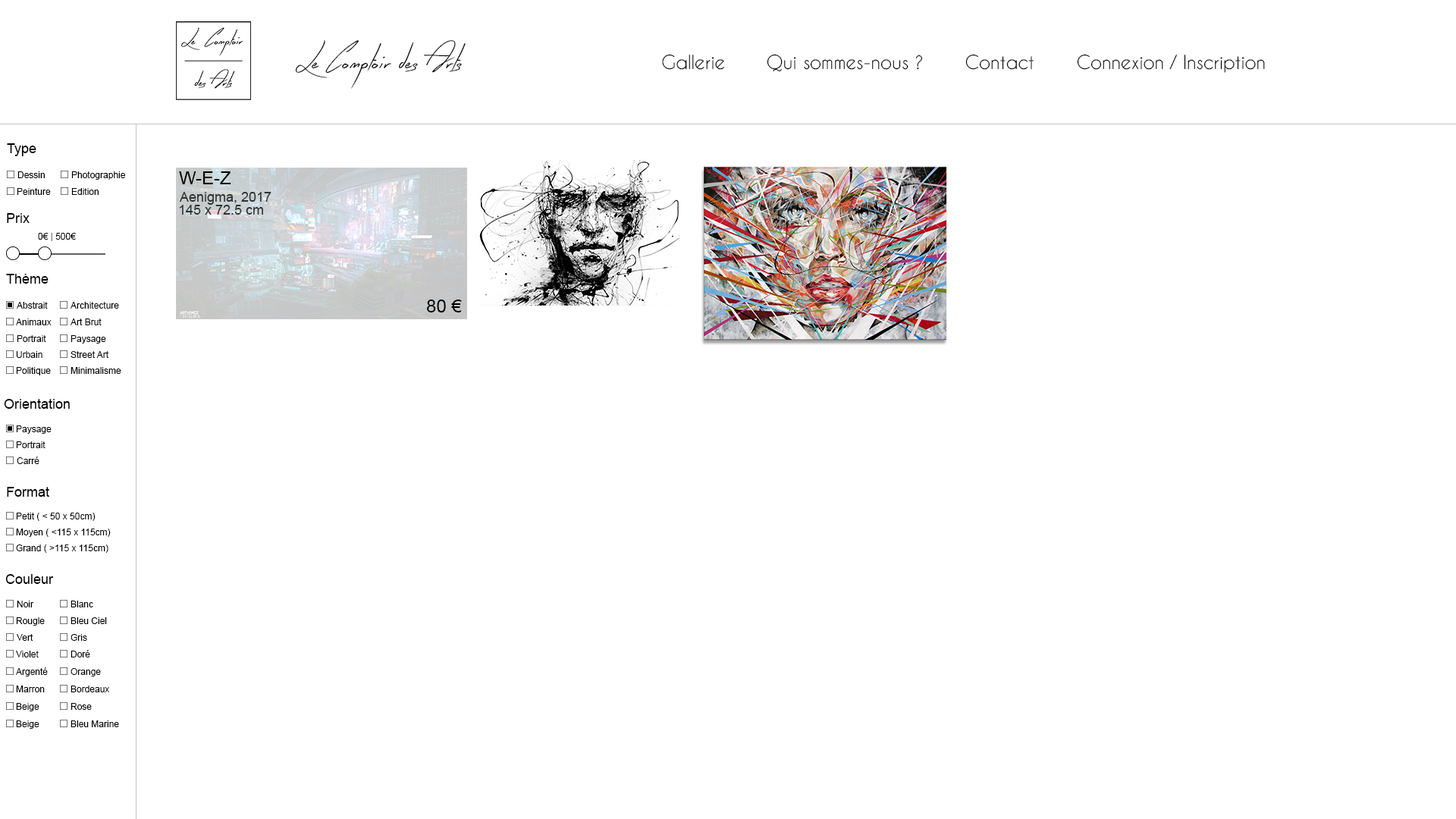
<style>
.page{position:relative;width:1456px;height:819px;background:#ffffff}
.page>*{position:absolute;margin:0}
.t1{font:33.4px "EarlyBird";color:#000000}
.t2{font:18.2px "CaviarDreams";color:#000000}
.t3{font:13.6px "ArialMT";color:#000000}
.t4{font:9.1px "ArialMT";color:#000000}
.t5{font:18.2px "ArialMT";color:#000000}
.t6{font:13.6px "ArialMT";color:#313131}
.t7{font:9.1px "ArialMT";color:#616161}
</style>
<div class="page">
<p class="t1" style="left:295px;top:40px;width:171px;height:49px">Le Comptoir des Arts</p>
<p class="t2" style="left:662px;top:54px;width:63px;height:16px">Gallerie</p>
<p class="t2" style="left:767px;top:54px;width:156px;height:18px">Qui sommes-nous ?</p>
<p class="t2" style="left:965px;top:54px;width:69px;height:16px">Contact</p>
<p class="t2" style="left:1077px;top:54px;width:188px;height:19px">Connexion / Inscription</p>
<p class="t3" style="left:7px;top:143px;width:29px;height:13px">Type</p>
<p class="t4" style="left:17px;top:171px;width:28px;height:7px">Dessin</p>
<p class="t4" style="left:71px;top:171px;width:54px;height:9px">Photographie</p>
<p class="t5" style="left:179px;top:171px;width:52px;height:13px">W-E-Z</p>
<p class="t4" style="left:17px;top:188px;width:34px;height:7px">Peinture</p>
<p class="t4" style="left:71px;top:188px;width:28px;height:7px">Edition</p>
<p class="t6" style="left:179px;top:192px;width:92px;height:13px">Aenigma, 2017</p>
<p class="t6" style="left:179px;top:205px;width:84px;height:10px">145 x 72.5 cm</p>
<p class="t3" style="left:7px;top:213px;width:23px;height:10px">Prix</p>
<p class="t4" style="left:38px;top:233px;width:38px;height:8px">0€ <span class="t7">| </span>500€</p>
<p class="t3" style="left:6px;top:274px;width:43px;height:10px">Thème</p>
<p class="t4" style="left:17px;top:302px;width:31px;height:7px">Abstrait</p>
<p class="t4" style="left:71px;top:302px;width:48px;height:7px">Architecture</p>
<p class="t5" style="left:427px;top:300px;width:35px;height:12px">80 €</p>
<p class="t4" style="left:16px;top:318px;width:36px;height:7px">Animaux</p>
<p class="t4" style="left:71px;top:318px;width:31px;height:7px">Art Brut</p>
<p class="t4" style="left:17px;top:335px;width:29px;height:7px">Portrait</p>
<p class="t4" style="left:71px;top:335px;width:35px;height:9px">Paysage</p>
<p class="t4" style="left:16px;top:351px;width:26px;height:7px">Urbain</p>
<p class="t4" style="left:71px;top:351px;width:37px;height:7px">Street Art</p>
<p class="t4" style="left:16px;top:367px;width:35px;height:8px">Politique</p>
<p class="t4" style="left:71px;top:367px;width:50px;height:7px">Minimalisme</p>
<p class="t3" style="left:4px;top:399px;width:66px;height:10px">Orientation</p>
<p class="t4" style="left:16px;top:425px;width:36px;height:9px">Paysage</p>
<p class="t4" style="left:16px;top:441px;width:29px;height:7px">Portrait</p>
<p class="t4" style="left:17px;top:457px;width:22px;height:7px">Carré</p>
<p class="t3" style="left:7px;top:487px;width:42px;height:10px">Format</p>
<p class="t4" style="left:16px;top:513px;width:80px;height:8px">Petit ( &lt; 50 x 50cm)</p>
<p class="t4" style="left:16px;top:529px;width:95px;height:8px">Moyen ( &lt;115 x 115cm)</p>
<p class="t4" style="left:16px;top:544px;width:92px;height:9px">Grand ( &gt;115 x 115cm)</p>
<p class="t3" style="left:5px;top:574px;width:49px;height:10px">Couleur</p>
<p class="t4" style="left:17px;top:601px;width:17px;height:6px">Noir</p>
<p class="t4" style="left:71px;top:601px;width:22px;height:6px">Blanc</p>
<p class="t4" style="left:16px;top:617px;width:29px;height:9px">Rougle</p>
<p class="t4" style="left:71px;top:617px;width:36px;height:7px">Bleu Ciel</p>
<p class="t4" style="left:17px;top:634px;width:16px;height:7px">Vert</p>
<p class="t4" style="left:71px;top:634px;width:16px;height:7px">Gris</p>
<p class="t4" style="left:16px;top:651px;width:23px;height:6px">Violet</p>
<p class="t4" style="left:71px;top:650px;width:19px;height:7px">Doré</p>
<p class="t4" style="left:16px;top:667px;width:32px;height:9px">Argenté</p>
<p class="t4" style="left:71px;top:668px;width:30px;height:8px">Orange</p>
<p class="t4" style="left:16px;top:686px;width:29px;height:6px">Marron</p>
<p class="t4" style="left:71px;top:686px;width:38px;height:6px">Bordeaux</p>
<p class="t4" style="left:16px;top:703px;width:23px;height:8px">Beige</p>
<p class="t4" style="left:71px;top:703px;width:21px;height:7px">Rose</p>
<p class="t4" style="left:16px;top:720px;width:23px;height:9px">Beige</p>
<p class="t4" style="left:71px;top:720px;width:48px;height:7px">Bleu Marine</p>
</div>
